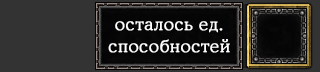
<style>
.page{position:relative;width:320px;height:72px;background:#333333}
.page>*{position:absolute;margin:0}
.t1{font:16.9px/22.8px "CooperLightCBT";letter-spacing:0.03em;color:#ffffff;font-weight:bold}
</style>
<div class="page">
<p class="t1" style="left:108px;top:21px;width:122px;height:32px;text-align:center">осталось ед.<br>способностей</p>
</div>
